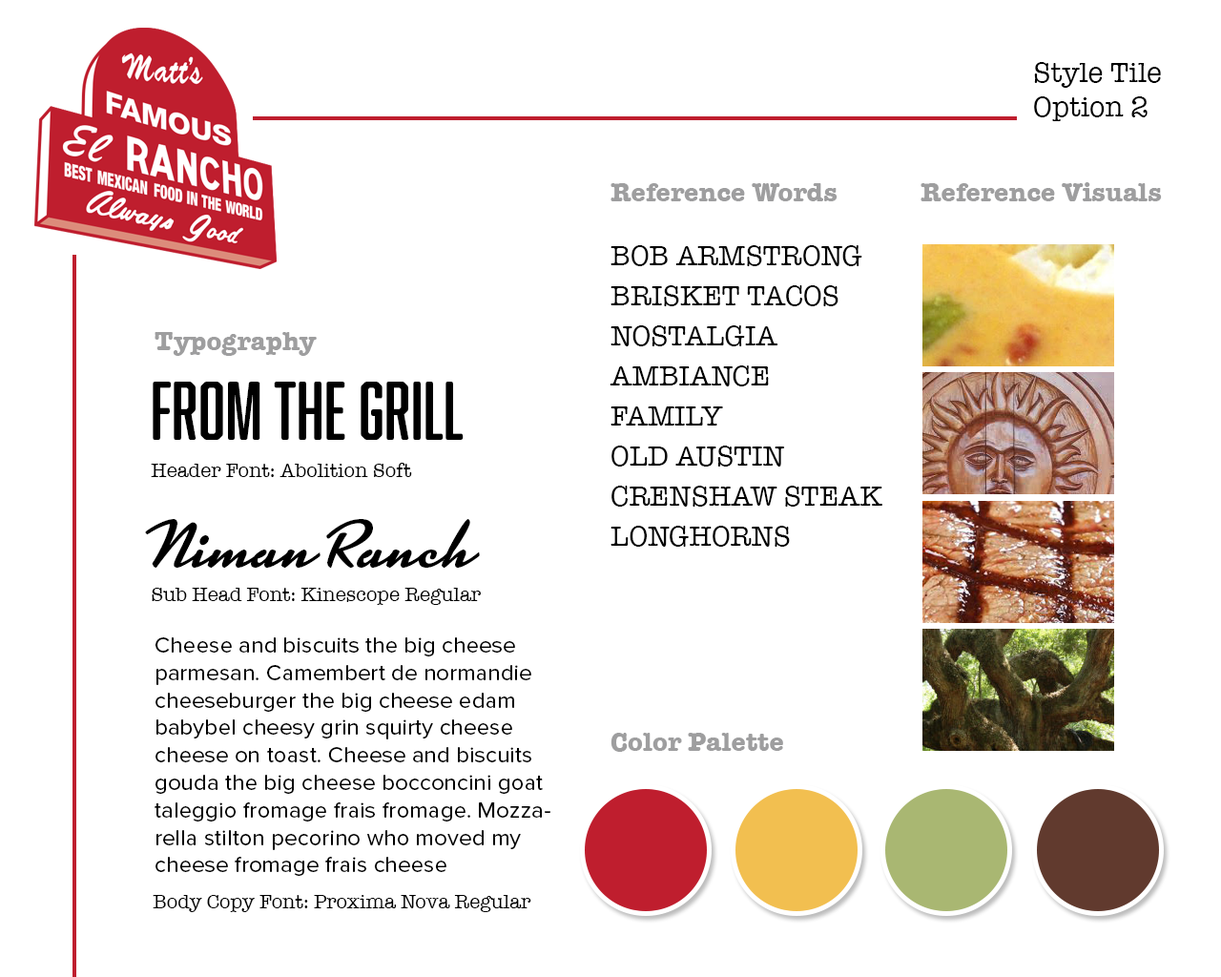
<style>
.page{position:relative;width:1221px;height:977px;background:#ffffff}
.page>*{position:absolute;margin:0}
.t1{font:28.6px "AmericanTypewriter";color:#000000}
.t2{font:26.7px "AmericanTypewriter-Bold";color:#9e9e9f}
.t3{font:28.6px/40.1px "AmericanTypewriter";color:#000000}
.t4{font:76.3px "Abolition-Soft";color:#000000}
.t5{font:20px "AmericanTypewriter";color:#000000}
.t6{font:66.8px "Kinescope";color:#000000}
.t7{font:22.9px "ProximaNova-Regular";letter-spacing:0.005em;color:#000000}
.t8{font:22.9px "MetallophileSp8-Light";letter-spacing:0.005em;color:#000000}
</style>
<div class="page">
<p class="t1" style="left:1034px;top:62px;width:127px;height:59px">Style Tile<br>Option 2</p>
<p class="t2" style="left:610px;top:183px;width:227px;height:18px">Reference Words</p>
<p class="t2" style="left:920px;top:182px;width:242px;height:19px">Reference Visuals</p>
<p class="t3" style="left:609px;top:245px;width:273px;height:302px">BOB ARMSTRONG<br>BRISKET TACOS<br>NOSTALGIA<br>AMBIANCE<br>FAMILY<br>OLD AUSTIN<br>CRENSHAW STEAK<br>LONGHORNS</p>
<p class="t2" style="left:155px;top:332px;width:162px;height:24px">Typography</p>
<p class="t4" style="left:153px;top:382px;width:311px;height:58px">From The Grill</p>
<p class="t5" style="left:151px;top:463px;width:261px;height:14px">Header Font: Abolition Soft</p>
<p class="t6" style="left:145px;top:519px;width:335px;height:49px">Niman Ranch</p>
<p class="t5" style="left:152px;top:588px;width:329px;height:17px">Sub Head Font: Kinescope Regular</p>
<p class="t7" style="left:155px;top:637px;width:395px;height:239px">Cheese and biscuits the big cheese parmesan. Camembert de normandie cheeseburger the big cheese edam babybel cheesy grin squirty cheese cheese on toast. Cheese and biscuits gouda the big cheese bocconcini goat taleggio fromage frais fromage. Mozzarella stilton pecorino who moved my cheese fromage frais cheese<br><span class="t8">and wine rubber cheese fromage. Cheeseburger cow<br>who moved my cheese the big cheese.</span></p>
<p class="t2" style="left:610px;top:733px;width:173px;height:19px">Color Palette</p>
<p class="t5" style="left:153px;top:895px;width:378px;height:17px">Body Copy Font: Proxima Nova Regular</p>
</div>
